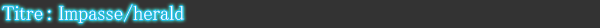
<style>
.page{position:relative;width:600px;height:28px;background:#333333}
.page>*{position:absolute;margin:0}
.t1{font:20px "MS-PMincho";color:#ffffff}
</style>
<div class="page">
<p class="t1" style="left:2px;top:4px;width:182px;height:19px">Titre : Impasse/herald</p>
</div>
